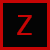
<style>
.page{position:relative;width:50px;height:50px;background:#040404}
.page>*{position:absolute;margin:0}
.t1{font:27.6px "LucidaGrande";color:#c70505}
</style>
<div class="page">
<p class="t1" style="left:17px;top:15px;width:15px;height:20px">Z</p>
</div>
